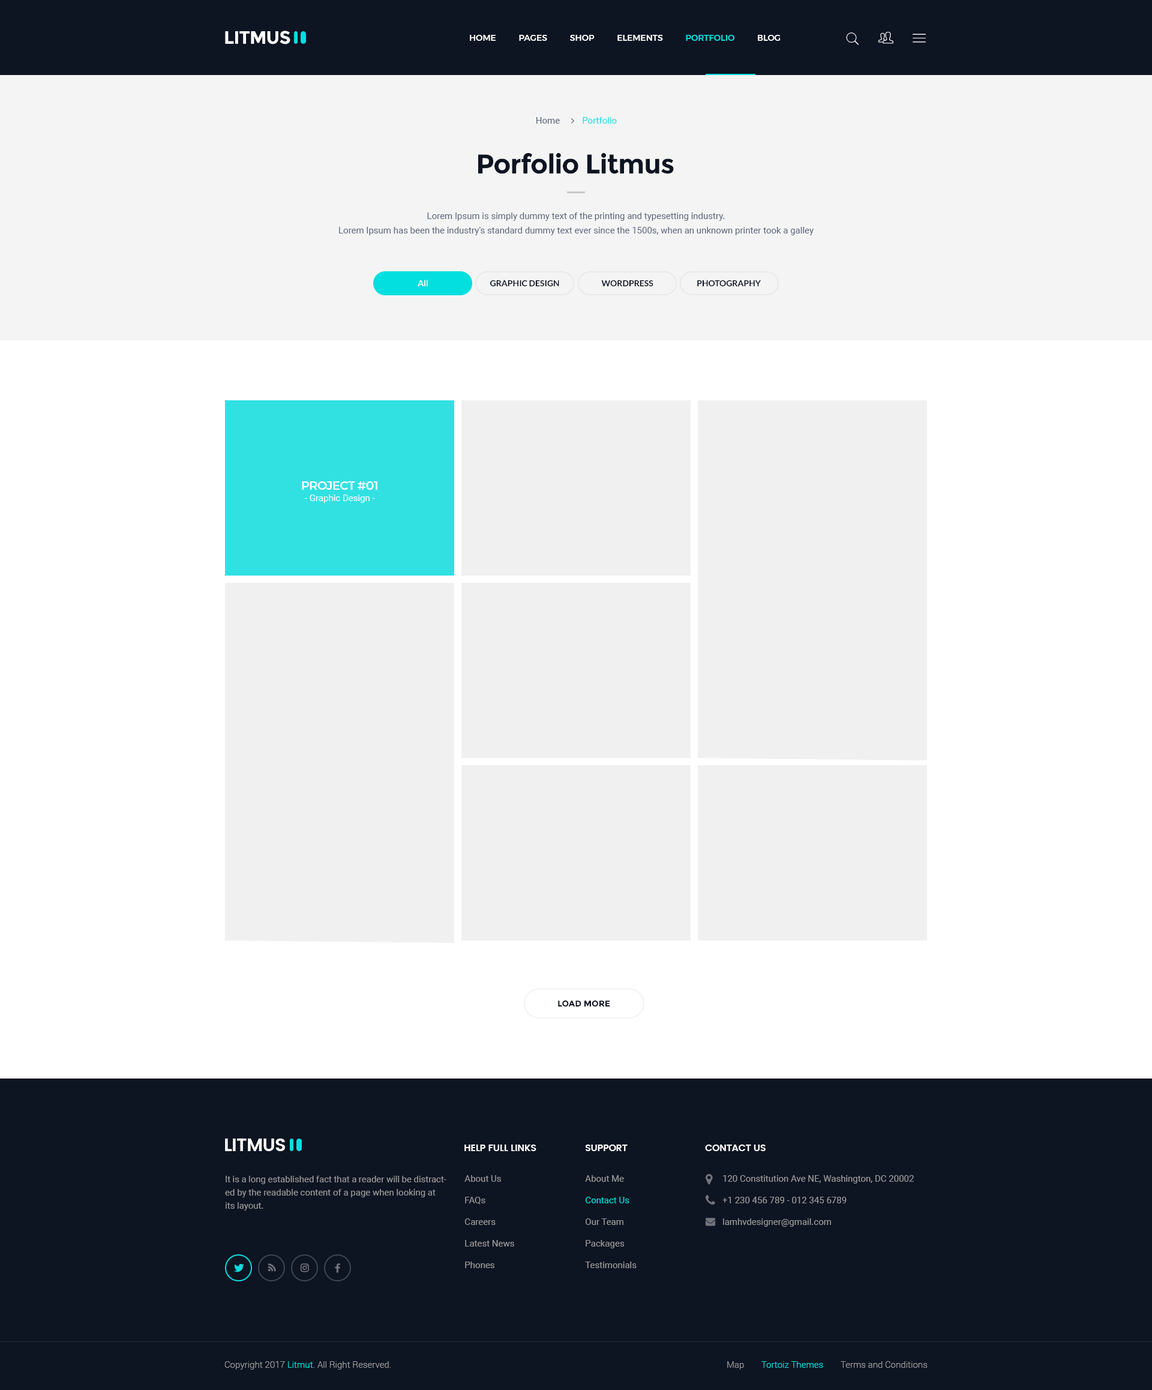
<style>
.page{position:relative;width:1152px;height:1390px;background:#ffffff}
.page>*{position:absolute;margin:0}
.t1{font:18px "Montserrat-Bold";letter-spacing:-0.025em;color:#ffffff;text-transform:uppercase}
.t2{font:8.4px "Montserrat-Medium";color:#ffffff;text-transform:uppercase}
.t3{font:8.4px "Montserrat-Medium";color:#03dedf;text-transform:uppercase}
.t4{font:9px "Roboto-Regular";color:#03dedf}
.t5{font:9px "Roboto-Regular";color:#5b6578}
.t6{font:27px "Montserrat-Bold";letter-spacing:-0.025em;color:#0d1422}
.t7{font:9px/14.4px "Roboto-Regular";color:#5b6578}
.t8{font:8.4px "Lato-Bold";color:#ffffff}
.t9{font:8.4px "Lato-Bold";color:#0d1422}
.t10{font:12px "Montserrat-Medium";letter-spacing:-0.025em;color:#ffffff;text-transform:uppercase}
.t11{font:9px "Roboto-Regular";color:#ffffff}
.t12{font:8.4px "Montserrat-Bold";color:#0d1422;text-transform:uppercase}
.t13{font:18px "Poppins-SemiBold";letter-spacing:-0.025em;color:#ffffff;text-transform:uppercase}
.t14{font:9.6px "Poppins-SemiBold";letter-spacing:-0.025em;color:#ffffff;text-transform:uppercase}
.t15{font:9px/13.2px "Roboto-Regular";color:#999999}
.t16{font:9px/21.6px "Roboto-Regular";color:#999999}
.t17{font:9px/21.6px "Roboto-Regular";color:#03dedf}
.t18{font:9px "Roboto-Light";color:#999999}
.t19{font:9px "Roboto-Light";color:#03dedf}
</style>
<div class="page">
<p class="t1" style="left:225px;top:31px;width:65px;height:13px">Litmus</p>
<p class="t2" style="left:470px;top:35px;width:311px;height:6px">HOME           PAGES           SHOP           ELEMENTS           <span class="t3">PORTFOLIO</span>           BLOG</p>
<p class="t4" style="left:536px;top:117px;width:81px;height:7px"><span class="t5">Home          </span>Portfolio</p>
<p class="t6" style="left:478px;top:153px;width:196px;height:21px">Porfolio Litmus</p>
<p class="t7" style="left:339px;top:212px;width:475px;height:23px;text-align:center">Lorem Ipsum is simply dummy text of the printing and typesetting industry.<br>Lorem Ipsum has been the industry's standard dummy text ever since the 1500s, when an unknown printer took a galley</p>
<p class="t8" style="left:418px;top:280px;width:10px;height:6px">All</p>
<p class="t9" style="left:490px;top:280px;width:69px;height:6px">GRAPHIC DESIGN</p>
<p class="t9" style="left:601px;top:280px;width:52px;height:6px">WORDPRESS</p>
<p class="t9" style="left:697px;top:280px;width:64px;height:6px">PHOTOGRAPHY</p>
<p class="t10" style="left:302px;top:481px;width:75px;height:9px">Project #01</p>
<p class="t11" style="left:305px;top:494px;width:70px;height:9px">- Graphic Design -</p>
<p class="t12" style="left:558px;top:1000px;width:52px;height:6px">Load More</p>
<p class="t13" style="left:225px;top:1138px;width:60px;height:13px">Litmus</p>
<p class="t14" style="left:464px;top:1144px;width:72px;height:7px">Help full links</p>
<p class="t14" style="left:586px;top:1144px;width:42px;height:7px">Support</p>
<p class="t14" style="left:705px;top:1144px;width:61px;height:7px">Contact Us</p>
<p class="t15" style="left:225px;top:1175px;width:221px;height:35px">It is a long established fact that a reader will be distracted by the readable content of a page when looking at its layout.</p>
<p class="t16" style="left:464px;top:1175px;width:50px;height:93px">About Us<br>FAQs<br>Careers<br>Latest News<br>Phones</p>
<p class="t16" style="left:585px;top:1175px;width:52px;height:93px">About Me<br><span class="t17">Contact Us<br></span>Our Team<br>Packages<br>Testimonials</p>
<p class="t16" style="left:722px;top:1175px;width:192px;height:51px">120 Constitution Ave NE, Washington, DC 20002<br>+1 230 456 789 - 012 345 6789<br>lamhvdesigner@gmail.com</p>
<p class="t18" style="left:224px;top:1361px;width:167px;height:8px">Copyright 2017 <span class="t19">Litmut</span>. All Right Reserved.</p>
<p class="t18" style="left:727px;top:1361px;width:17px;height:8px">Map</p>
<p class="t19" style="left:761px;top:1361px;width:62px;height:6px">Tortoiz Themes</p>
<p class="t18" style="left:841px;top:1361px;width:87px;height:6px">Terms and Conditions</p>
</div>
